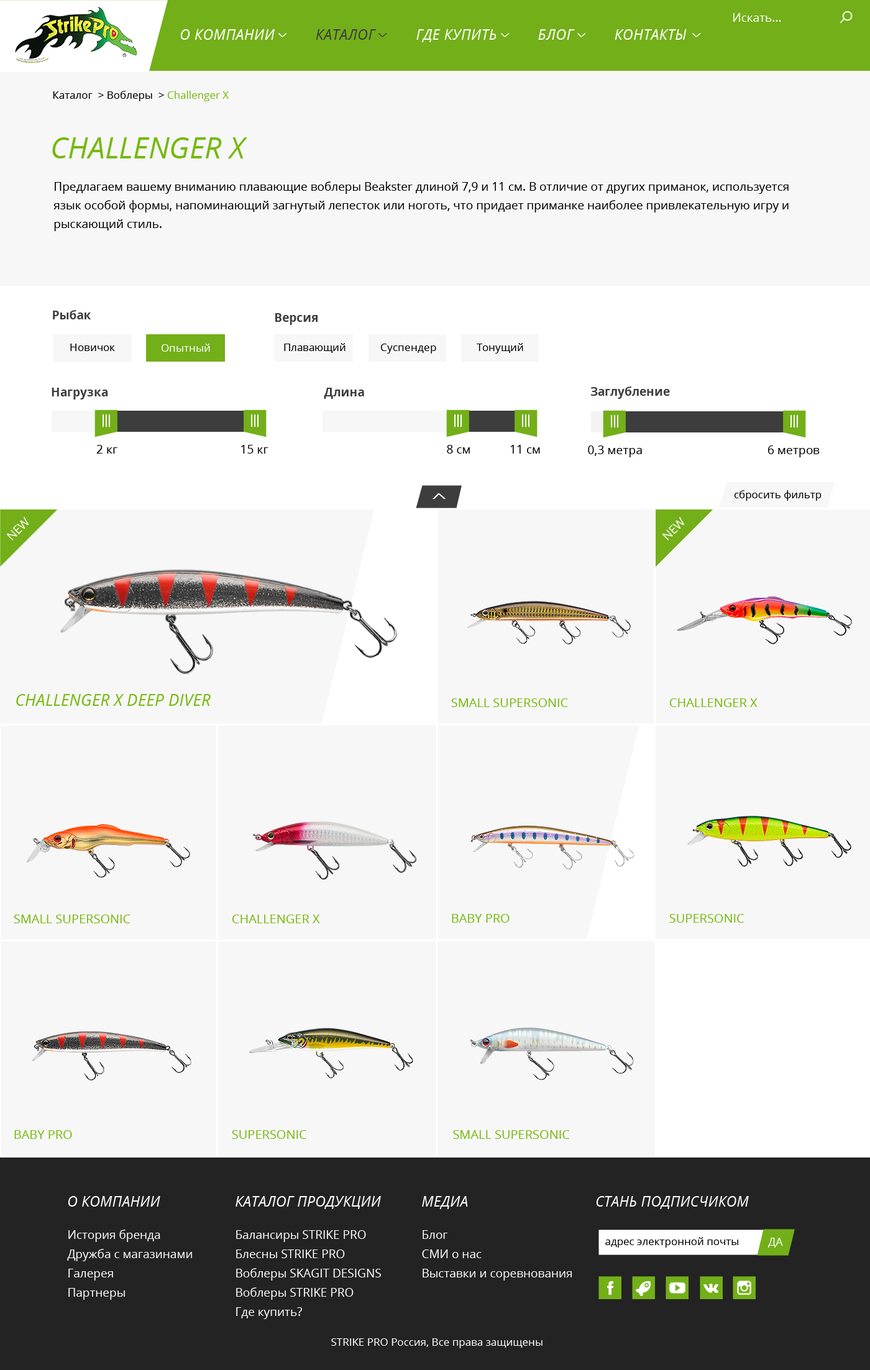
<style>
.page{position:relative;width:870px;height:1370px;background:#f7f7f7}
.page>*{position:absolute;margin:0}
.t1{font:11.8px "OpenSans";color:#ffffff}
.t2{font:14.3px "OpenSans-Italic";letter-spacing:0.025em;color:#ffffff;text-transform:uppercase}
.t3{font:14.3px "OpenSans-Italic";letter-spacing:0.025em;color:#3d3d3d;text-transform:uppercase}
.t4{font:18.3px "OpenSans";color:#ffffff;text-transform:uppercase;scale:0.43 1}
.t5{font:18.3px "OpenSans";color:#3d3d3d;text-transform:uppercase;scale:0.43 1}
.t6{font:10.6px "OpenSans";color:#000000}
.t7{font:10.6px "OpenSans";color:#76b910}
.t8{font:29.8px "OpenSans-Italic";color:#76b910;text-transform:uppercase}
.t9{font:11.8px/18.6px "OpenSans";color:#000000}
.t10{font:11.8px "OpenSans-Bold";color:#3d3d3d}
.t11{font:10.6px "OpenSans";color:#ffffff}
.t12{font:12.4px "MyriadPro-Bold";letter-spacing:-0.05em;color:#ffffff}
.t13{font:11.8px "OpenSans";color:#000000}
.t14{font:27.4px "OpenSans";color:#ffffff;text-transform:uppercase;scale:0.43 1}
.t15{font:11.8px "OpenSans";color:#ffffff;text-transform:uppercase}
.t16{font:16.2px "OpenSans-Italic";letter-spacing:0.01em;color:#76b910;text-transform:uppercase}
.t17{font:12.4px "OpenSans";color:#76b910;text-transform:uppercase}
.t18{font:14.3px "OpenSans-Italic";letter-spacing:0.01em;color:#ffffff;text-transform:uppercase}
.t19{font:11.8px/19.3px "OpenSans";color:#ffffff}
.t20{font:11.2px "OpenSans";color:#ffffff;text-transform:uppercase}
</style>
<div class="page">
<p class="t1" style="left:733px;top:13px;width:48px;height:9px">Искать...</p>
<p class="t2" style="left:180px;top:29px;width:507px;height:13px">О компании          <span class="t3">Каталог          </span>где купить          блог          контакты</p>
<p class="t4" style="left:278px;top:33px;width:9px;height:4px;rotate:90deg">&gt;</p>
<p class="t5" style="left:378px;top:33px;width:9px;height:4px;rotate:90deg">&gt;</p>
<p class="t4" style="left:500px;top:33px;width:10px;height:4px;rotate:90deg">&gt;</p>
<p class="t4" style="left:577px;top:33px;width:9px;height:4px;rotate:90deg">&gt;</p>
<p class="t4" style="left:692px;top:33px;width:9px;height:4px;rotate:90deg">&gt;</p>
<p class="t6" style="left:53px;top:91px;width:176px;height:10px">Каталог  &gt; Воблеры  &gt; <span class="t7">Challenger X</span></p>
<p class="t8" style="left:52px;top:137px;width:195px;height:21px">Challenger X</p>
<p class="t9" style="left:53px;top:181px;width:736px;height:50px">Предлагаем вашему вниманию плавающие воблеры Beakster длиной 7,9 и 11 см. В отличие от других приманок, используется язык особой формы, напоминающий загнутый лепесток или ноготь, что придает приманке наиболее привлекательную игру и рыскающий стиль.</p>
<p class="t10" style="left:53px;top:310px;width:38px;height:9px">Рыбак</p>
<p class="t10" style="left:275px;top:313px;width:43px;height:12px">Версия</p>
<p class="t6" style="left:70px;top:344px;width:45px;height:7px">Новичок</p>
<p class="t11" style="left:161px;top:344px;width:49px;height:8px">Опытный</p>
<p class="t6" style="left:284px;top:343px;width:62px;height:10px">Плавающий</p>
<p class="t6" style="left:381px;top:344px;width:55px;height:10px">Суспендер</p>
<p class="t6" style="left:477px;top:343px;width:46px;height:11px">Тонущий</p>
<p class="t10" style="left:52px;top:388px;width:56px;height:12px">Нагрузка</p>
<p class="t10" style="left:324px;top:388px;width:40px;height:11px">Длина</p>
<p class="t10" style="left:591px;top:387px;width:79px;height:12px">Заглубление</p>
<p class="t12" style="left:103px;top:415px;width:4px;height:12px">||</p>
<p class="t12" style="left:254px;top:415px;width:5px;height:12px;rotate:180deg">||</p>
<p class="t12" style="left:454px;top:415px;width:5px;height:12px">||</p>
<p class="t12" style="left:525px;top:415px;width:5px;height:12px;rotate:180deg">||</p>
<p class="t12" style="left:611px;top:415px;width:4px;height:13px">||</p>
<p class="t12" style="left:794px;top:415px;width:4px;height:13px;rotate:180deg">||</p>
<p class="t13" style="left:96px;top:445px;width:21px;height:9px">2 кг</p>
<p class="t13" style="left:241px;top:445px;width:27px;height:9px">15 кг</p>
<p class="t13" style="left:447px;top:445px;width:23px;height:9px">8 см</p>
<p class="t13" style="left:510px;top:445px;width:30px;height:9px">11 см</p>
<p class="t13" style="left:588px;top:446px;width:54px;height:11px">0,3 метра</p>
<p class="t13" style="left:768px;top:446px;width:52px;height:11px">6 метров</p>
<p class="t14" style="left:433px;top:493px;width:13px;height:7px;rotate:-90deg">&gt;</p>
<p class="t6" style="left:734px;top:490px;width:88px;height:11px">сбросить фильтр</p>
<p class="t15" style="left:6px;top:517px;width:23px;height:24px;rotate:-45deg">NEw</p>
<p class="t15" style="left:662px;top:517px;width:23px;height:24px;rotate:-45deg">NEw</p>
<p class="t16" style="left:16px;top:694px;width:195px;height:12px">Challenger X Deep Diver</p>
<p class="t17" style="left:451px;top:699px;width:117px;height:8px">Small Supersonic</p>
<p class="t17" style="left:669px;top:699px;width:89px;height:8px">Challenger X</p>
<p class="t17" style="left:14px;top:915px;width:117px;height:9px">Small Supersonic</p>
<p class="t17" style="left:232px;top:915px;width:88px;height:9px">Challenger X</p>
<p class="t17" style="left:452px;top:914px;width:58px;height:9px">BaBy PRO</p>
<p class="t17" style="left:669px;top:914px;width:75px;height:9px">SUperSonic</p>
<p class="t17" style="left:14px;top:1131px;width:58px;height:8px">Baby Pro</p>
<p class="t17" style="left:232px;top:1131px;width:74px;height:8px">Supersonic</p>
<p class="t17" style="left:453px;top:1131px;width:117px;height:8px">Small Supersonic</p>
<p class="t18" style="left:68px;top:1196px;width:92px;height:11px">о компании</p>
<p class="t18" style="left:236px;top:1196px;width:145px;height:13px">каталог продукции</p>
<p class="t18" style="left:422px;top:1196px;width:46px;height:13px">Медиа</p>
<p class="t18" style="left:596px;top:1196px;width:153px;height:13px">стань подписчиком</p>
<p class="t19" style="left:67px;top:1230px;width:125px;height:70px">История бренда<br>Дружба с магазинами<br>Галерея<br>Партнеры</p>
<p class="t19" style="left:236px;top:1231px;width:145px;height:88px">Балансиры STRIKE PRO<br>Блесны STRIKE PRO<br>Воблеры SKAGIT DESIGNS<br>Воблеры STRIKE PRO<br>Где купить?</p>
<p class="t19" style="left:422px;top:1231px;width:150px;height:50px">Блог<br>СМИ о нас<br>Выставки и соревнования</p>
<p class="t6" style="left:605px;top:1237px;width:133px;height:11px">адрес электронной почты</p>
<p class="t20" style="left:768px;top:1238px;width:15px;height:10px">Да</p>
<p class="t11" style="left:331px;top:1339px;width:212px;height:10px">STRIKE PRO Россия, Все права защищены</p>
</div>
